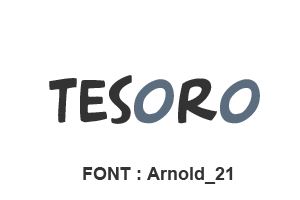
<style>
.page{position:relative;width:300px;height:200px;background:#ffffff}
.page>*{position:absolute;margin:0}
.t1{font:60px "Arnold21";color:#333333}
.t2{font:60px "Arnold21";color:#5c6d7f}
.t3{font:18px "Arial-BoldMT";color:#333333}
</style>
<div class="page">
<p class="t1" style="left:49px;top:75px;width:211px;height:49px">Tes<span class="t2">o</span>r<span class="t2">o</span></p>
<p class="t3" style="left:83px;top:167px;width:150px;height:17px">FONT : Arnold_21</p>
</div>
